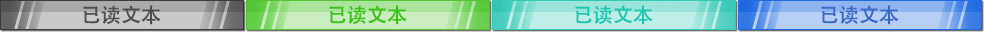
<style>
.page{position:relative;width:984px;height:32px}
.page>*{position:absolute;margin:0}
.t1{font:20px "AdobeHeitiStd-Regular";color:#4e4e4e}
.t2{font:20px "AdobeHeitiStd-Regular";color:#38c312}
.t3{font:20px "AdobeHeitiStd-Regular";color:#18c7b2}
.t4{font:20px "AdobeHeitiStd-Regular";color:#3867c9}
</style>
<div class="page">
<p class="t1" style="left:83px;top:5px;width:78px;height:20px">已读文本</p>
<p class="t2" style="left:329px;top:5px;width:78px;height:20px">已读文本</p>
<p class="t3" style="left:575px;top:5px;width:78px;height:20px">已读文本</p>
<p class="t4" style="left:821px;top:5px;width:78px;height:20px">已读文本</p>
</div>
